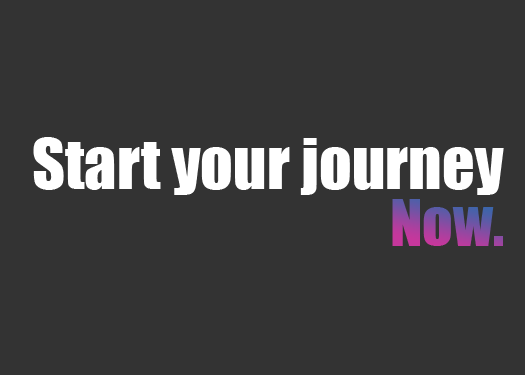
<style>
.page{position:relative;width:525px;height:375px;background:#333333}
.page>*{position:absolute;margin:0}
.t1{font:64.1px "Impact";color:#ffffff}
.t2{font:59.5px "Impact"}
</style>
<div class="page">
<p class="t1" style="left:33px;top:137px;width:471px;height:58px">Start your journey</p>
<p class="t2" style="left:392px;top:199px;width:111px;height:47px">Now.</p>
</div>
